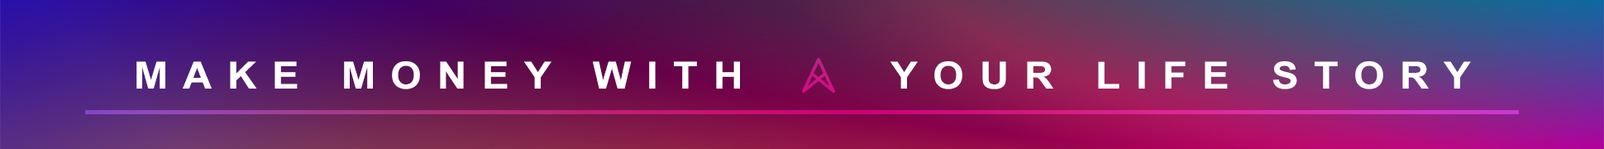
<style>
.page{position:relative;width:1604px;height:149px}
.page>*{position:absolute;margin:0}
.t1{font:9px "Arial-BoldMT";letter-spacing:0.38em;color:#ffffff;scale:1.08 1}
</style>
<div class="page">
<p class="t1" style="left:136px;top:61px;width:1335px;height:28px;text-align:center">MAKE MONEY WITH     YOUR LIFE STORY</p>
</div>
